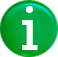
<style>
.page{position:relative;width:58px;height:57px;background:#ffffff}
.page>*{position:absolute;margin:0}
.t1{font:64px "Rockwell";color:#ffffff}
</style>
<div class="page">
<p class="t1" style="left:22px;top:6px;width:16px;height:44px">i</p>
</div>
